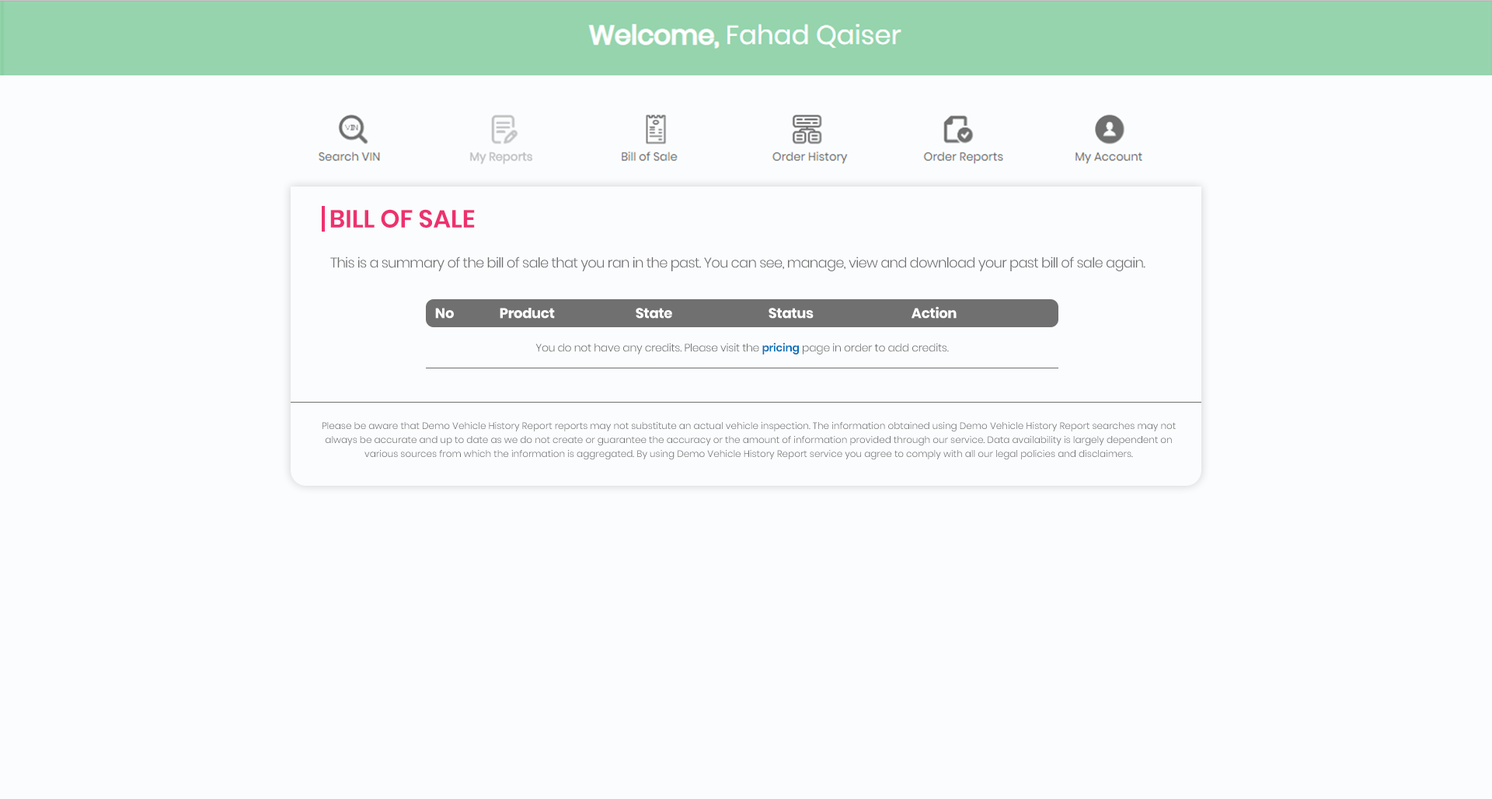
<style>
.page{position:relative;width:1492px;height:799px;background:#fafcfe}
.page>*{position:absolute;margin:0}
.t1{font:24.9px "Poppins-SemiBold";color:#ee316e}
.t2{font:14px "Poppins-Light";letter-spacing:-0.04em;color:#707070}
.t3{font:14px "Poppins";letter-spacing:-0.02em;color:#ffffff}
.t4{font:14px "Poppins-Bold";letter-spacing:-0.02em;color:#ffffff}
.t5{font:10.9px "Poppins-Light";letter-spacing:-0.02em;color:#707070}
.t6{font:10.9px "Poppins-SemiBold";letter-spacing:-0.02em;color:#0b71b9}
.t7{font:9.3px/14px "Poppins-Light";color:#707070}
</style>
<div class="page">
<p class="t1" style="left:330px;top:209px;width:145px;height:19px">BILL OF SALE</p>
<p class="t2" style="left:330px;top:256px;width:816px;height:15px">This is a summary of the bill of sale that you ran in the past. You can see, manage, view and download your past bill of sale again.</p>
<p class="t3" style="left:435px;top:308px;width:19px;height:11px">No</p>
<p class="t4" style="left:500px;top:308px;width:55px;height:11px">Product</p>
<p class="t4" style="left:636px;top:308px;width:36px;height:11px">State</p>
<p class="t4" style="left:769px;top:308px;width:45px;height:11px">Status</p>
<p class="t3" style="left:912px;top:306px;width:45px;height:13px">Action</p>
<p class="t5" style="left:536px;top:343px;width:413px;height:11px">You do not have any credits. Please visit the <span class="t6">pricing</span> page in order to add credits.</p>
<p class="t7" style="left:323px;top:422px;width:853px;height:38px;text-align:center">Please be aware that Demo Vehicle History Report reports may not substitute an actual vehicle inspection. The information obtained using Demo Vehicle History Report searches may not always be accurate and up to date as we do not create or guarantee the accuracy or the amount of information provided through our service. Data availability is largely dependent on various sources from which the information is aggregated. By using Demo Vehicle History Report service you agree to comply with all our legal policies and disclaimers.</p>
</div>
